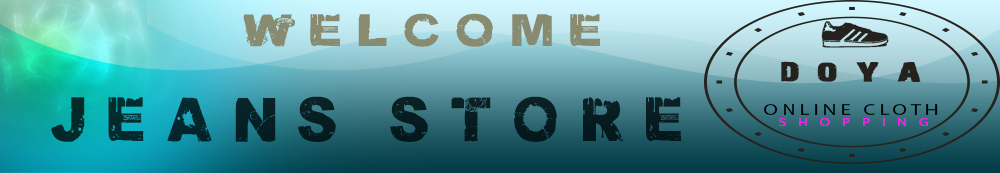
<style>
.page{position:relative;width:1000px;height:173px}
.page>*{position:absolute;margin:0}
.t1{font:38.5px "DamnedDeluxe-Normal";letter-spacing:0.35em;color:#898b71;scale:1.1 1}
.t2{font:25.1px/36.9px "28-Days-Later-Regular";letter-spacing:0.46em;color:#25221d;font-weight:bold;scale:1.48 1}
.t3{font:37px/13.9px "Sneakers";letter-spacing:-0.12em;color:#25221d;font-weight:bold}
.t4{font:37px/13.9px "Sneakers";letter-spacing:0.02em;color:#25221d;font-weight:bold}
.t5{font:53.1px "DamnedDeluxe-Normal";letter-spacing:0.39em;color:#020c0e;scale:0.94 1}
.t6{font:15px "MyriadPro-Regular";letter-spacing:0.2em;color:#000000;scale:1.38 1}
.t7{font:11.7px "MyriadPro-Regular";letter-spacing:0.2em;color:#25221d;scale:1.38 1}
.t8{font:10.8px "MyriadPro-Regular";letter-spacing:0.8em;color:#ff16f3;scale:1.38 1}
.t9{font:5.4px "MyriadPro-Regular";letter-spacing:0.8em;color:#25221d;scale:1.38 1}
</style>
<div class="page">
<p class="t1" style="left:243px;top:13px;width:357px;height:34px">welcome</p>
<p class="t2" style="left:781px;top:21px;width:140px;height:61px"><span class="t3">       </span><span class="t4">A<br></span>DOYA</p>
<p class="t5" style="left:51px;top:96px;width:630px;height:46px;opacity:0.9">jeans store</p>
<p class="t6" style="left:764px;top:104px;width:174px;height:11px"><span class="t7">              </span>ONLINE CLOTH</p>
<p class="t8" style="left:779px;top:118px;width:149px;height:8px"><span class="t9">        </span>SHOPPING</p>
</div>
